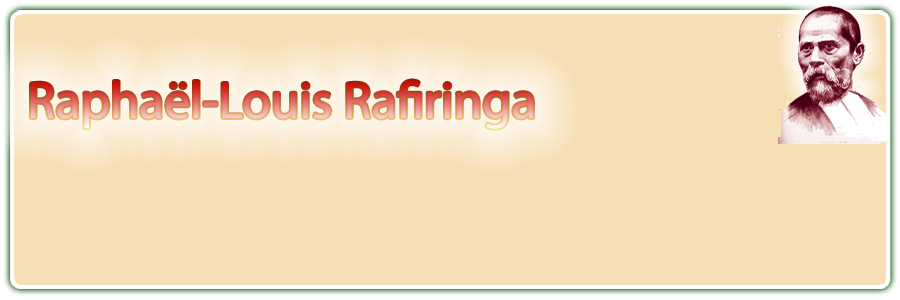
<style>
.page{position:relative;width:900px;height:300px;background:#f7dfb5}
.page>*{position:absolute;margin:0}
.t1{font:52px "TransRomanAH";font-weight:bold}
</style>
<div class="page">
<p class="t1" style="left:27px;top:74px;width:509px;height:57px">Raphaël-Louis Rafiringa</p>
</div>
